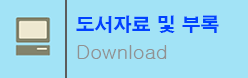
<style>
.page{position:relative;width:248px;height:78px;background:#a2e3f6}
.page>*{position:absolute;margin:0}
.t1{font:18.7px "H2gtrE";color:#0042ff}
.t2{font:19.7px "Gulim";color:#919191}
</style>
<div class="page">
<p class="t1" style="left:76px;top:15px;width:143px;height:18px">도서자료 및 부록</p>
<p class="t2" style="left:77px;top:45px;width:90px;height:14px">Download</p>
</div>
